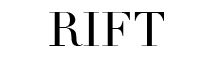
<style>
.page{position:relative;width:204px;height:57px;background:#ffffff}
.page>*{position:absolute;margin:0}
.t1{font:48px "Didot";color:#000000}
</style>
<div class="page">
<p class="t1" style="left:49px;top:12px;width:115px;height:34px">RIFT</p>
</div>
